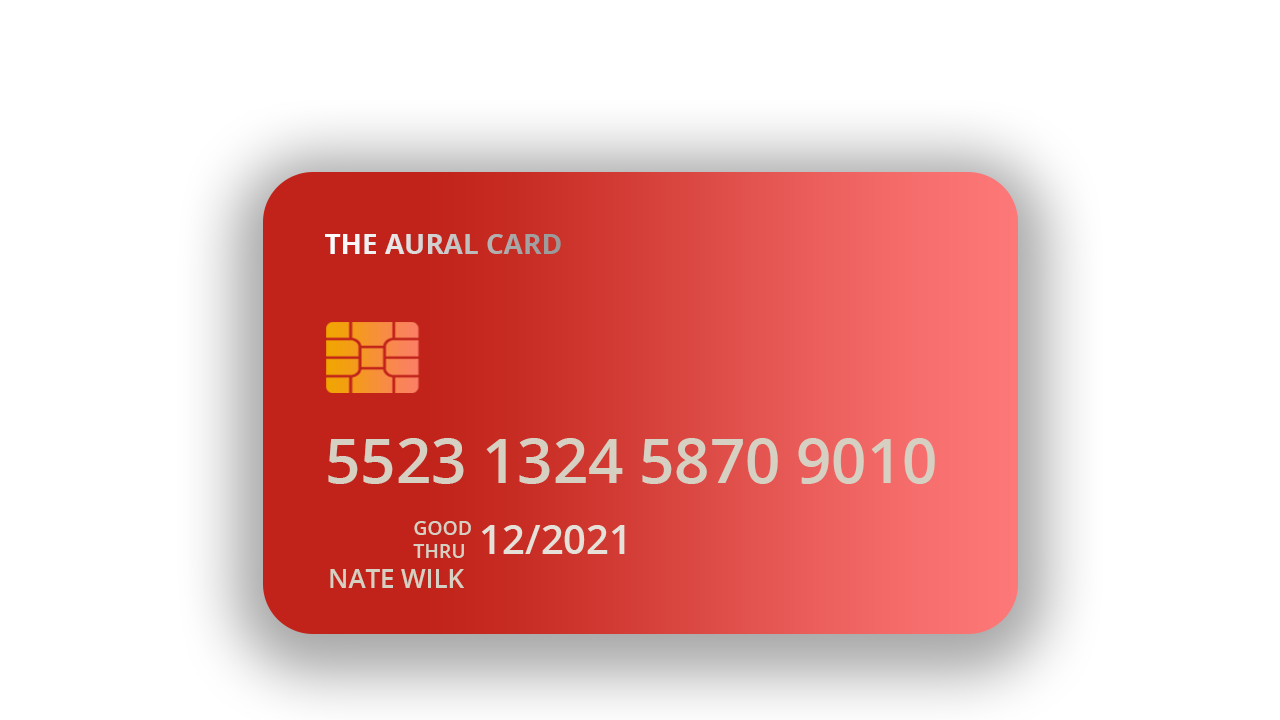
<style>
.page{position:relative;width:1280px;height:720px;background:#ffffff}
.page>*{position:absolute;margin:0}
.t1{font:27.9px "OpenSans-Bold"}
.t2{font:61.7px "OpenSans-Semibold";color:#d6d0c3}
.t3{font:19.3px/22.5px "OpenSans-Semibold";color:#d6d0c3}
.t4{font:40px "OpenSans-Semibold";color:#e5e1d9}
.t5{font:25.8px "OpenSans-Semibold";color:#d6d0c3}
</style>
<div class="page">
<p class="t1" style="left:325px;top:234px;width:236px;height:20px">THE AURAL CARD</p>
<p class="t2" style="left:328px;top:438px;width:607px;height:46px">5523 1324 5870 9010</p>
<p class="t3" style="left:413px;top:521px;width:58px;height:37px">GOOD<br>THRU</p>
<p class="t4" style="left:482px;top:525px;width:143px;height:29px">12/2021</p>
<p class="t5" style="left:330px;top:569px;width:134px;height:19px">NATE WILK</p>
</div>
